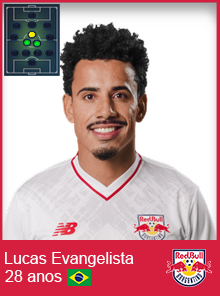
<style>
.page{position:relative;width:220px;height:296px;background:#ffffff}
.page>*{position:absolute;margin:0}
.t1{font:16px "ArialMT";color:#ffffff}
</style>
<div class="page">
<p class="t1" style="left:5px;top:252px;width:129px;height:15px">Lucas Evangelista</p>
<p class="t1" style="left:5px;top:270px;width:57px;height:12px">28 anos</p>
</div>
